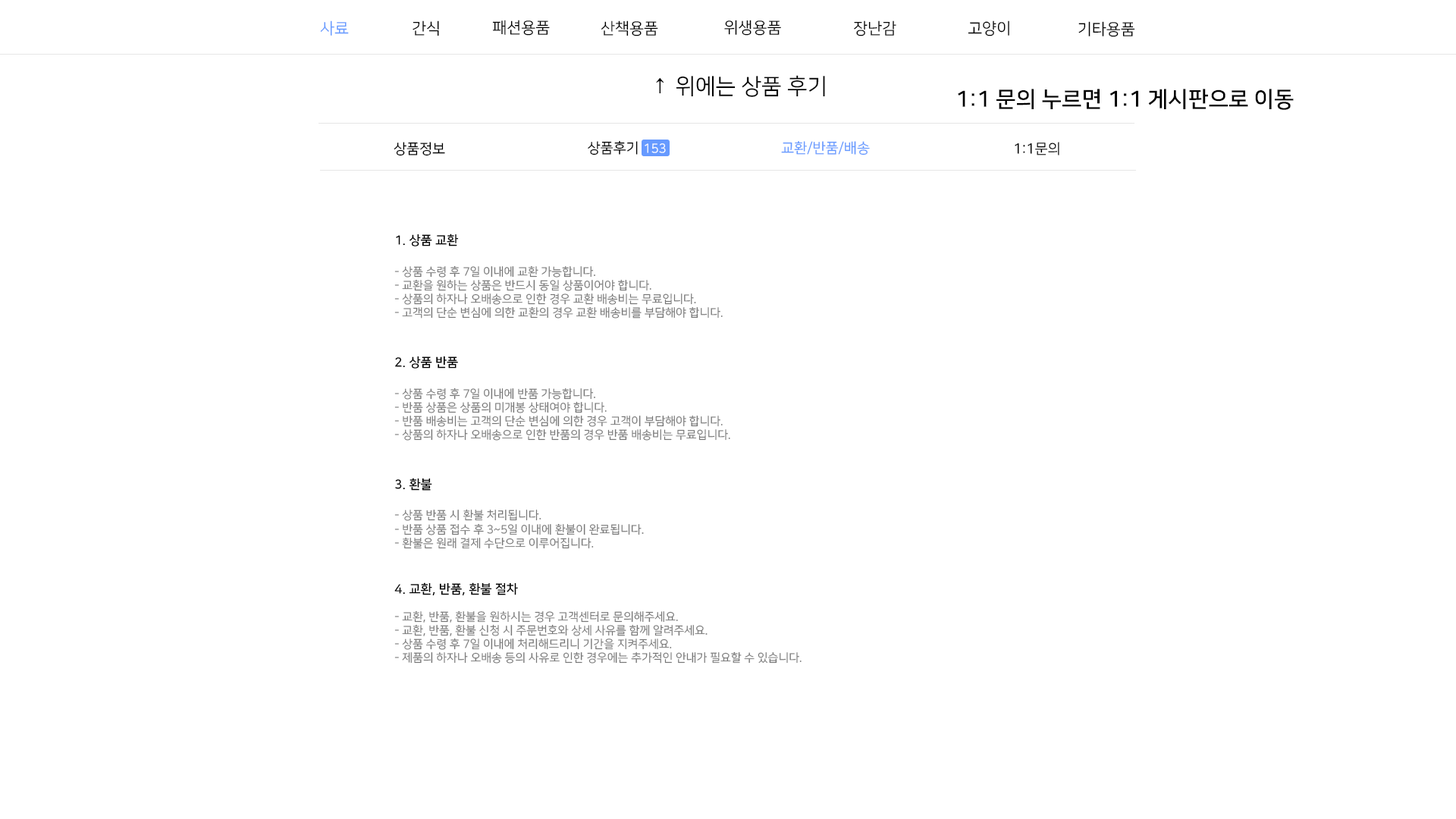
<style>
.page{position:relative;width:1456px;height:819px;background:#ffffff}
.page>*{position:absolute;margin:0}
.t1{font:15.8px "NanumSquareR";color:#669aff}
.t2{font:15.8px "NanumSquareR";color:#000000}
.t3{font:22.1px "NanumSquareR";color:#000000}
.t4{font:22.1px "NanumSquareB";color:#000000}
.t5{font:14.2px "NanumSquareR";color:#000000}
.t6{font:12.6px "NanumSquareR";color:#ffffff}
.t7{font:14.2px "NanumSquareR";color:#669aff}
.t8{font:11.5px "NanumSquareR";color:#777777}
.t9{font:12.6px "NanumSquareB";color:#000000}
</style>
<div class="page">
<p class="t1" style="left:320px;top:20px;width:29px;height:16px">사료</p>
<p class="t2" style="left:413px;top:20px;width:26px;height:16px">간식</p>
<p class="t2" style="left:492px;top:20px;width:58px;height:16px">패션용품</p>
<p class="t2" style="left:601px;top:20px;width:57px;height:16px">산책용품</p>
<p class="t2" style="left:724px;top:20px;width:57px;height:16px">위생용품</p>
<p class="t2" style="left:854px;top:20px;width:42px;height:16px">장난감</p>
<p class="t2" style="left:968px;top:20px;width:41px;height:16px">고양이</p>
<p class="t2" style="left:1078px;top:21px;width:57px;height:16px">기타용품</p>
<p class="t3" style="left:656px;top:75px;width:169px;height:22px">↑ 위에는 상품 후기</p>
<p class="t4" style="left:958px;top:89px;width:336px;height:21px">1:1 문의 누르면 1:1 게시판으로 이동</p>
<p class="t5" style="left:394px;top:142px;width:51px;height:14px">상품정보</p>
<p class="t5" style="left:588px;top:140px;width:50px;height:15px">상품후기</p>
<p class="t6" style="left:645px;top:143px;width:21px;height:10px">153</p>
<p class="t7" style="left:781px;top:141px;width:89px;height:14px">교환/반품/배송</p>
<p class="t5" style="left:1015px;top:142px;width:44px;height:13px">1:1문의</p>
<p class="t8" style="left:394px;top:234px;width:408px;height:430px"><span class="t9">1. 상품 교환<br><br></span>- 상품 수령 후 7일 이내에 교환 가능합니다.<br>- 교환을 원하는 상품은 반드시 동일 상품이어야 합니다.<br>- 상품의 하자나 오배송으로 인한 경우 교환 배송비는 무료입니다.<br>- 고객의 단순 변심에 의한 교환의 경우 교환 배송비를 부담해야 합니다.<br><br><br><span class="t9">2. 상품 반품<br><br></span>- 상품 수령 후 7일 이내에 반품 가능합니다.<br>- 반품 상품은 상품의 미개봉 상태여야 합니다.<br>- 반품 배송비는 고객의 단순 변심에 의한 경우 고객이 부담해야 합니다.<br>- 상품의 하자나 오배송으로 인한 반품의 경우 반품 배송비는 무료입니다.<br><br><br><span class="t9">3. 환불<br><br></span>- 상품 반품 시 환불 처리됩니다.<br>- 반품 상품 접수 후 3~5일 이내에 환불이 완료됩니다.<br>- 환불은 원래 결제 수단으로 이루어집니다.<br><br><br><span class="t9">4. 교환, 반품, 환불 절차<br></span><br>- 교환, 반품, 환불을 원하시는 경우 고객센터로 문의해주세요.<br>- 교환, 반품, 환불 신청 시 주문번호와 상세 사유를 함께 알려주세요.<br>- 상품 수령 후 7일 이내에 처리해드리니 기간을 지켜주세요.<br>- 제품의 하자나 오배송 등의 사유로 인한 경우에는 추가적인 안내가 필요할 수 있습니다.</p>
</div>
